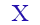
<style>
.page{position:relative;width:40px;height:25px;background:#ffffff}
.page>*{position:absolute;margin:0}
.t1{font:24px "TimesNewRomanPSMT";color:#2710af}
</style>
<div class="page">
<p class="t1" style="left:11px;top:5px;width:18px;height:16px">X</p>
</div>
